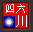
<style>
.page{position:relative;width:33px;height:32px;background:#f20000}
.page>*{position:absolute;margin:0}
.t1{font:10.4px "SimSun";color:#ffffff}
.t2{font:11.7px "SimSun";color:#ffffff}
</style>
<div class="page">
<p class="t1" style="left:6px;top:4px;width:19px;height:9px">四六</p>
<p class="t2" style="left:16px;top:15px;width:11px;height:12px">川</p>
</div>
